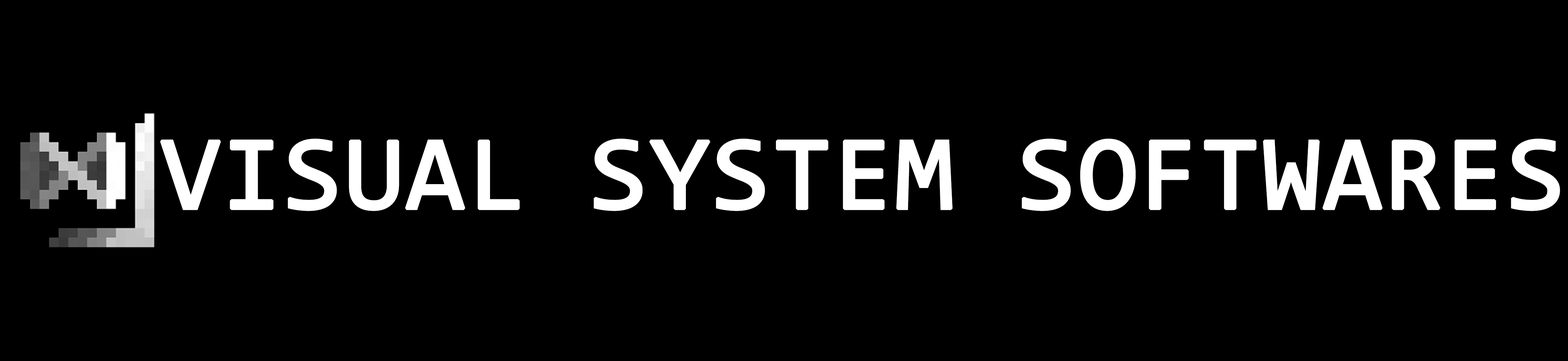
<style>
.page{position:relative;width:1568px;height:361px;background:#000000}
.page>*{position:absolute;margin:0}
.t1{font:105.7px "Consolas";color:#ffffff;font-weight:bold}
</style>
<div class="page">
<p class="t1" style="left:160px;top:139px;width:1400px;height:72px">VISUAL SYSTEM SOFTWARES</p>
</div>
